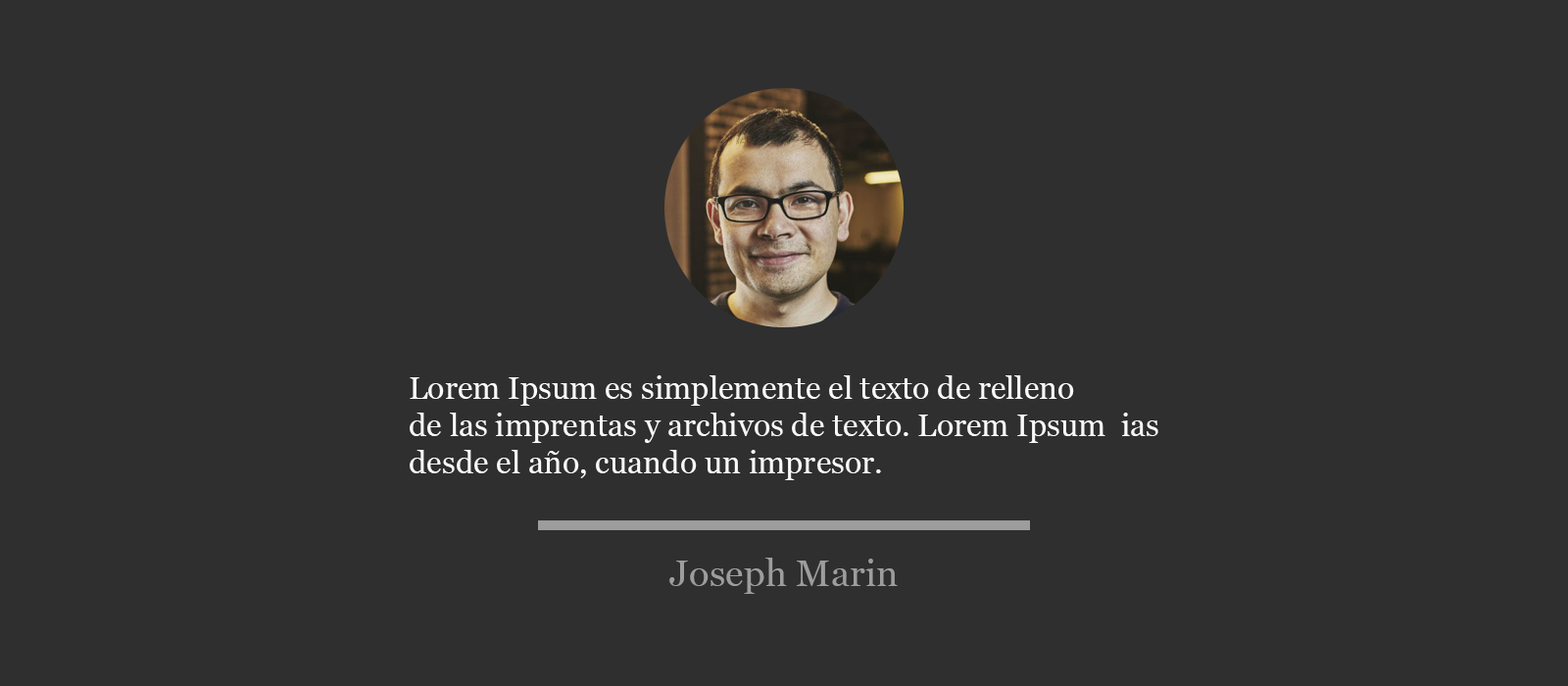
<style>
.page{position:relative;width:1568px;height:686px;background:#2f2f2f}
.page>*{position:absolute;margin:0}
.t1{font:31.4px "Georgia";color:#f9f9f9}
.t2{font:37.6px "Georgia";color:#9d9d9d}
</style>
<div class="page">
<p class="t1" style="left:410px;top:375px;width:748px;height:105px">Lorem Ipsum es simplemente el texto de relleno <br>de las imprentas y archivos de texto. Lorem Ipsum  ias <br>desde el año, cuando un impresor.</p>
<p class="t2" style="left:669px;top:558px;width:229px;height:36px">Joseph Marin</p>
</div>
